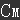
<style>
.page{position:relative;width:20px;height:20px;background:#333333}
.page>*{position:absolute;margin:0}
.t1{font:20px "LiSu";color:#ffffff;font-variant:small-caps}
.t2{font:13px "LiSu";color:#ffffff;font-variant:small-caps}
</style>
<div class="page">
<p class="t1" style="left:1px;top:4px;width:18px;height:13px">C<span class="t2">M</span></p>
</div>
